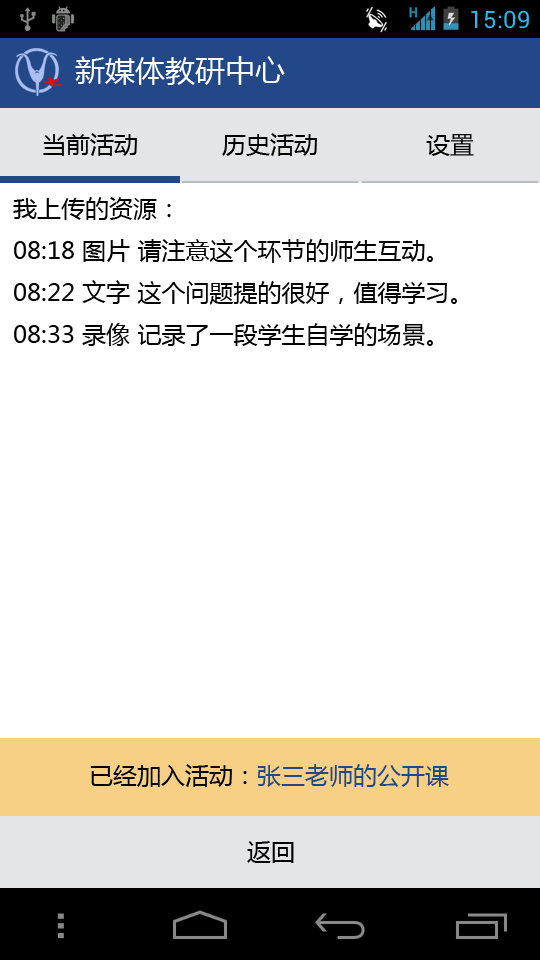
<style>
.page{position:relative;width:540px;height:960px;background:#ffffff}
.page>*{position:absolute;margin:0}
.t1{font:24px "MicrosoftYaHei";color:#000000}
.t2{font:24px "MicrosoftYaHei";color:#224888}
</style>
<div class="page">
<p class="t1" style="left:13px;top:197px;width:444px;height:149px">我上传的资源：<br>08:18 图片 请注意这个环节的师生互动。<br>08:22 文字 这个问题提的很好，值得学习。<br>08:33 录像 记录了一段学生自学的场景。</p>
<p class="t2" style="left:90px;top:764px;width:359px;height:23px"><span class="t1">已经加入活动：</span>张三老师的公开课</p>
<p class="t1" style="left:247px;top:841px;width:47px;height:22px">返回</p>
</div>
